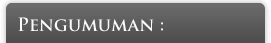
<style>
.page{position:relative;width:271px;height:43px}
.page>*{position:absolute;margin:0}
.t1{font:18px "TrajanPro-Bold";color:#fcfbfb}
</style>
<div class="page">
<p class="t1" style="left:18px;top:17px;width:145px;height:15px">Pengumuman :</p>
</div>
